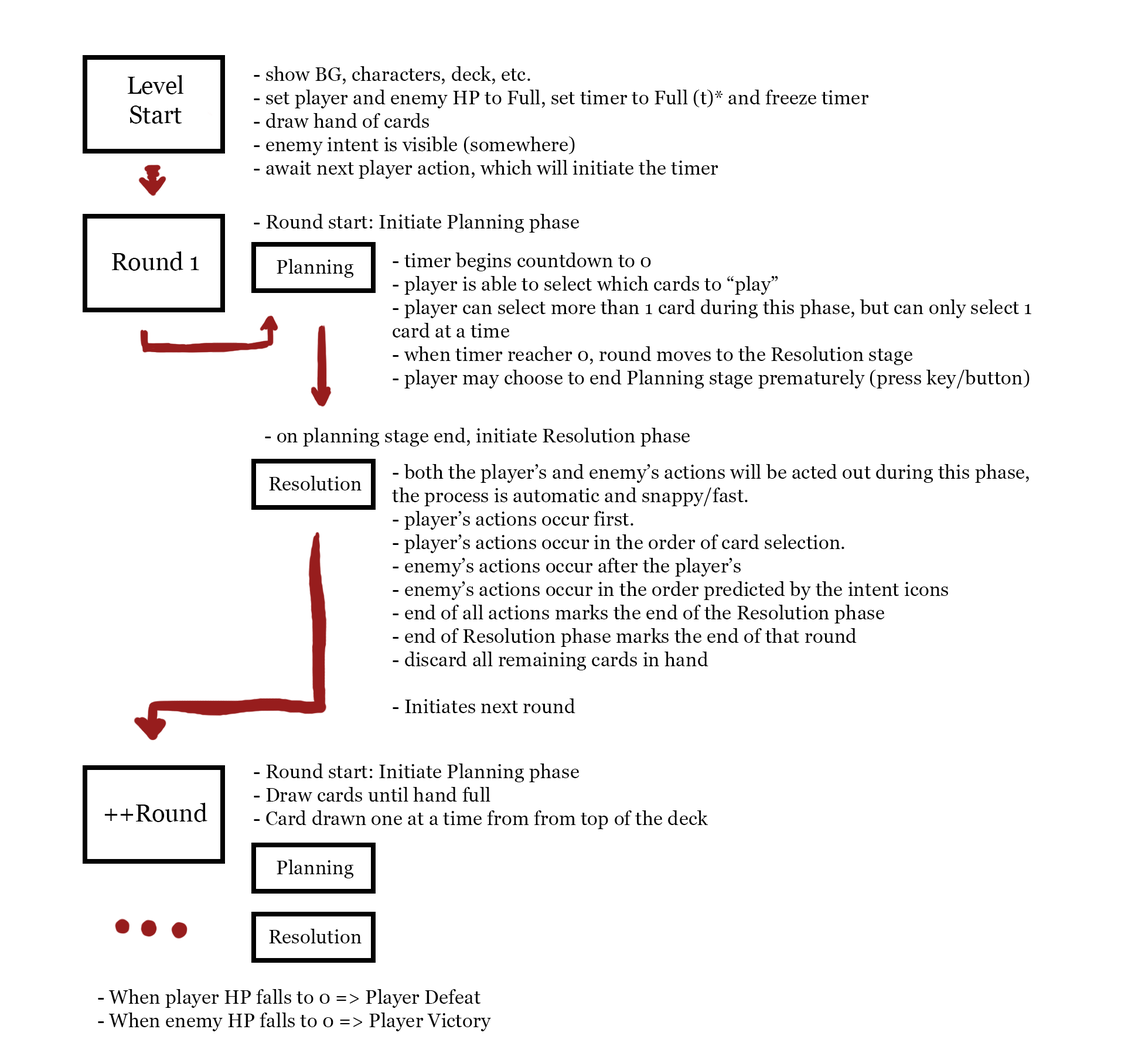
<style>
.page{position:relative;width:1125px;height:1060px;background:#ffffff}
.page>*{position:absolute;margin:0}
.t1{font:24.4px "Georgia";color:#020202}
.t2{font:19.5px "Georgia";color:#020202}
</style>
<div class="page">
<p class="t1" style="left:128px;top:75px;width:55px;height:49px;text-align:center">Level<br>Start</p>
<p class="t2" style="left:254px;top:66px;width:615px;height:113px">- show BG, characters, deck, etc.<br>- set player and enemy HP to Full, set timer to Full (t)* and freeze timer<br>- draw hand of cards<br>- enemy intent is visible (somewhere)<br>- await next player action, which will initiate the timer</p>
<p class="t2" style="left:254px;top:214px;width:325px;height:19px">- Round start: Initiate Planning phase</p>
<p class="t1" style="left:112px;top:251px;width:87px;height:20px">Round 1</p>
<p class="t2" style="left:393px;top:253px;width:638px;height:135px">- timer begins countdown to 0<br>- player is able to select which cards to “play”<br>- player can select more than 1 card during this phase, but can only select 1 card at a time<br>- when timer reacher 0, round moves to the Resolution stage<br>- player may choose to end Planning stage prematurely (press key/button)</p>
<p class="t2" style="left:277px;top:259px;width:77px;height:19px">Planning</p>
<p class="t2" style="left:265px;top:428px;width:425px;height:18px">- on planning stage end, initiate Resolution phase</p>
<p class="t2" style="left:392px;top:464px;width:637px;height:249px">- both the player’s and enemy’s actions will be acted out during this phase, the process is automatic and snappy/fast.<br>- player’s actions occur first.<br>- player’s actions occur in the order of card selection.<br>- enemy’s actions occur after the player’s<br>- enemy’s actions occur in the order predicted by the intent icons<br>- end of all actions marks the end of the Resolution phase<br>- end of Resolution phase marks the end of that round<br>- discard all remaining cards in hand<br><br>- Initiates next round</p>
<p class="t2" style="left:269px;top:476px;width:93px;height:14px">Resolution</p>
<p class="t2" style="left:254px;top:763px;width:454px;height:66px">- Round start: Initiate Planning phase<br>- Draw cards until hand full<br>- Card drawn one at a time from from top of the deck</p>
<p class="t1" style="left:104px;top:803px;width:103px;height:19px">++Round</p>
<p class="t2" style="left:277px;top:860px;width:77px;height:18px">Planning</p>
<p class="t2" style="left:269px;top:929px;width:93px;height:14px">Resolution</p>
<p class="t2" style="left:98px;top:989px;width:393px;height:42px">- When player HP falls to 0 =&gt; Player Defeat<br>- When enemy HP falls to 0 =&gt; Player Victory</p>
</div>
